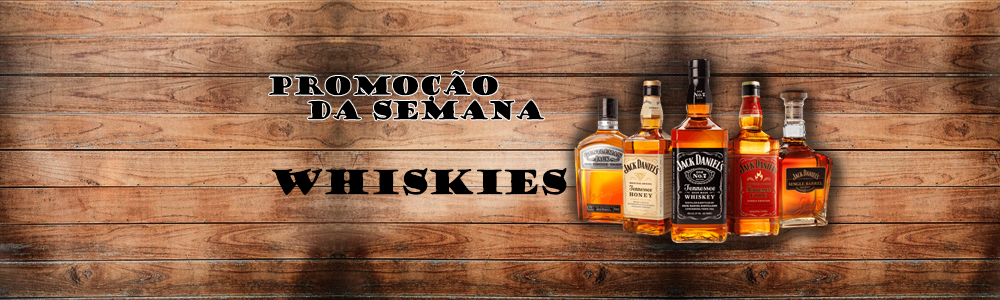
<style>
.page{position:relative;width:1000px;height:300px}
.page>*{position:absolute;margin:0}
.t1{font:24.6px/24.6px "GoudyStout";letter-spacing:-0.1em;color:#000000}
.t2{font:32.8px "GoudyStout";letter-spacing:-0.1em;color:#000000}
</style>
<div class="page">
<p class="t1" style="left:268px;top:70px;width:276px;height:51px;text-align:center">PROMOÇÃO<br>   DA SEMANA</p>
<p class="t2" style="left:272px;top:168px;width:295px;height:28px">wHISKIES</p>
</div>
